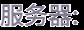
<style>
.page{position:relative;width:84px;height:30px;background:#000000}
.page>*{position:absolute;margin:0}
.t1{font:24px "WebPSD-18463539-0-Regular";color:#837a91;font-weight:bold}
</style>
<div class="page">
<p class="t1" style="left:0px;top:0px;width:84px;height:30px">服务器:</p>
</div>
